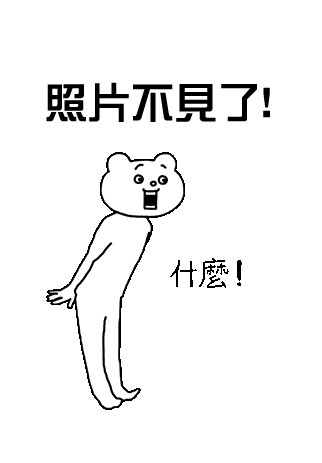
<style>
.page{position:relative;width:322px;height:463px;background:#ffffff}
.page>*{position:absolute;margin:0}
.t1{font:43px "DFZongYi-W5-WINP-BF";color:#000000}
</style>
<div class="page">
<p class="t1" style="left:46px;top:82px;width:224px;height:40px">照片不見了!</p>
</div>
